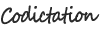
<style>
.page{position:relative;width:100px;height:30px;background:#ffffff}
.page>*{position:absolute;margin:0}
.t1{font:21.4px "SegoeScript";letter-spacing:-0.085em;color:#292929;font-weight:bold;scale:0.8 1}
</style>
<div class="page">
<p class="t1" style="left:1px;top:5px;width:99px;height:20px">Codictation</p>
</div>
